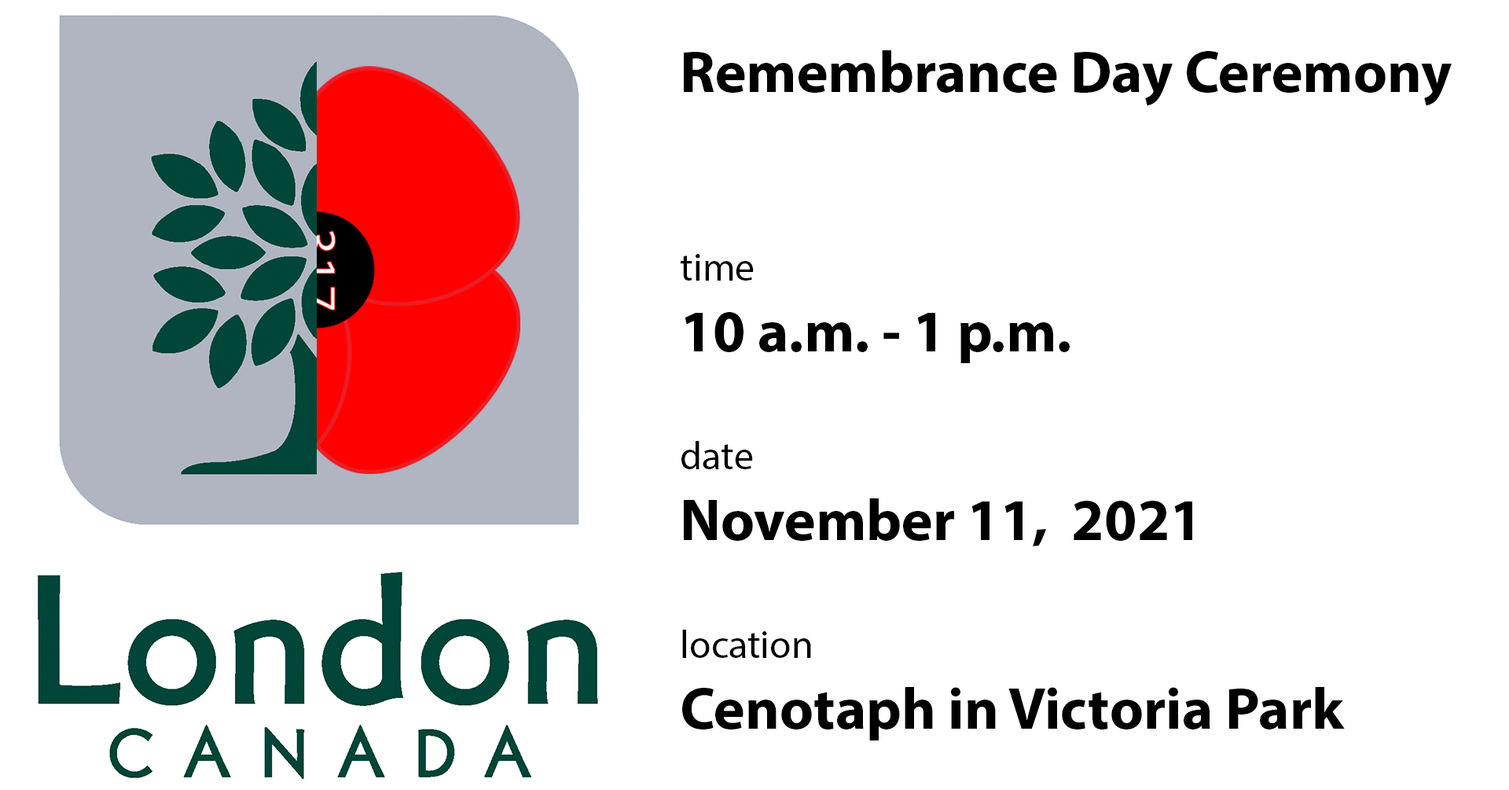
<style>
.page{position:relative;width:1509px;height:790px;background:#ffffff}
.page>*{position:absolute;margin:0}
.t1{font:59px "MyriadPro-Bold";color:#000000}
.t2{font:39.3px "MyriadPro-Regular";color:#000000}
</style>
<div class="page">
<p class="t1" style="left:681px;top:50px;width:771px;height:691px">Remembrance Day Ceremony<br><br><br><span class="t2">time<br></span>10 a.m. - 1 p.m.<br><br><span class="t2">date<br></span>November 11,  2021<br><br><span class="t2">location<br></span>Cenotaph in Victoria Park</p>
</div>
